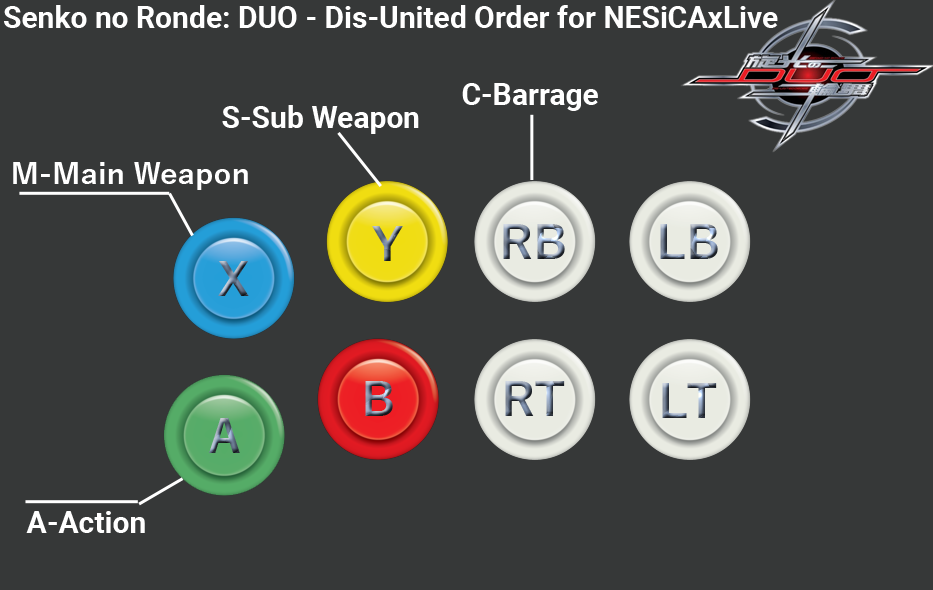
<style>
.page{position:relative;width:933px;height:590px;background:#363838}
.page>*{position:absolute;margin:0}
.t1{font:30px "Roboto-Bold";color:#ffffff}
.t2{font:30px "YuGothic-Bold";color:#ffffff}
</style>
<div class="page">
<p class="t1" style="left:4px;top:5px;width:774px;height:23px">Senko no Ronde: DUO - Dis-United Order for NESiCAxLive</p>
<p class="t1" style="left:462px;top:83px;width:136px;height:28px">C-Barrage</p>
<p class="t1" style="left:222px;top:105px;width:197px;height:29px">S-Sub Weapon</p>
<p class="t2" style="left:13px;top:162px;width:235px;height:28px">M-Main Weapon</p>
<p class="t1" style="left:26px;top:511px;width:119px;height:22px">A-Action</p>
</div>
